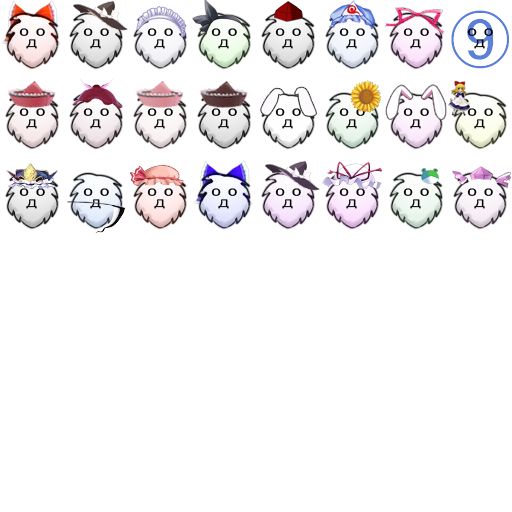
<style>
.page{position:relative;width:512px;height:512px;background:#ffffff}
.page>*{position:absolute;margin:0}
.t1{font:14px "MS-Gothic";color:#000000;scale:1.4 1}
.t2{font:9.8px "MS-Gothic";color:#000000;scale:1.43 1}
</style>
<div class="page">
<p class="t1" style="left:19px;top:28px;width:10px;height:8px">o</p>
<p class="t1" style="left:36px;top:28px;width:9px;height:8px">o</p>
<p class="t1" style="left:83px;top:28px;width:10px;height:8px">o</p>
<p class="t1" style="left:100px;top:28px;width:9px;height:8px">o</p>
<p class="t1" style="left:147px;top:28px;width:10px;height:8px">o</p>
<p class="t1" style="left:164px;top:28px;width:9px;height:8px">o</p>
<p class="t1" style="left:211px;top:28px;width:10px;height:8px">o</p>
<p class="t1" style="left:228px;top:28px;width:9px;height:8px">o</p>
<p class="t1" style="left:275px;top:28px;width:10px;height:8px">o</p>
<p class="t1" style="left:292px;top:28px;width:9px;height:8px">o</p>
<p class="t1" style="left:339px;top:28px;width:10px;height:8px">o</p>
<p class="t1" style="left:356px;top:28px;width:9px;height:8px">o</p>
<p class="t1" style="left:403px;top:28px;width:10px;height:8px">o</p>
<p class="t1" style="left:420px;top:28px;width:9px;height:8px">o</p>
<p class="t1" style="left:467px;top:28px;width:10px;height:8px">o</p>
<p class="t1" style="left:484px;top:28px;width:9px;height:8px">o</p>
<p class="t2" style="left:26px;top:39px;width:11px;height:10px">Д</p>
<p class="t2" style="left:90px;top:39px;width:11px;height:10px">Д</p>
<p class="t2" style="left:154px;top:39px;width:11px;height:10px">Д</p>
<p class="t2" style="left:218px;top:39px;width:11px;height:10px">Д</p>
<p class="t2" style="left:282px;top:39px;width:11px;height:10px">Д</p>
<p class="t2" style="left:346px;top:39px;width:11px;height:10px">Д</p>
<p class="t2" style="left:410px;top:39px;width:11px;height:10px">Д</p>
<p class="t2" style="left:474px;top:39px;width:11px;height:10px">Д</p>
<p class="t1" style="left:19px;top:108px;width:10px;height:8px">o</p>
<p class="t1" style="left:36px;top:108px;width:9px;height:8px">o</p>
<p class="t1" style="left:83px;top:108px;width:10px;height:8px">o</p>
<p class="t1" style="left:100px;top:108px;width:9px;height:8px">o</p>
<p class="t1" style="left:147px;top:108px;width:10px;height:8px">o</p>
<p class="t1" style="left:164px;top:108px;width:9px;height:8px">o</p>
<p class="t1" style="left:211px;top:108px;width:10px;height:8px">o</p>
<p class="t1" style="left:228px;top:108px;width:9px;height:8px">o</p>
<p class="t1" style="left:275px;top:108px;width:10px;height:8px">o</p>
<p class="t1" style="left:292px;top:108px;width:9px;height:8px">o</p>
<p class="t1" style="left:339px;top:108px;width:10px;height:8px">o</p>
<p class="t1" style="left:356px;top:108px;width:9px;height:8px">o</p>
<p class="t1" style="left:403px;top:108px;width:10px;height:8px">o</p>
<p class="t1" style="left:420px;top:108px;width:9px;height:8px">o</p>
<p class="t1" style="left:467px;top:108px;width:10px;height:8px">o</p>
<p class="t1" style="left:484px;top:108px;width:9px;height:8px">o</p>
<p class="t2" style="left:26px;top:119px;width:11px;height:10px">Д</p>
<p class="t2" style="left:90px;top:119px;width:11px;height:10px">Д</p>
<p class="t2" style="left:154px;top:119px;width:11px;height:10px">Д</p>
<p class="t2" style="left:218px;top:119px;width:11px;height:10px">Д</p>
<p class="t2" style="left:282px;top:119px;width:11px;height:10px">Д</p>
<p class="t2" style="left:346px;top:119px;width:11px;height:10px">Д</p>
<p class="t2" style="left:410px;top:119px;width:11px;height:10px">Д</p>
<p class="t2" style="left:474px;top:119px;width:11px;height:10px">Д</p>
<p class="t1" style="left:19px;top:188px;width:10px;height:8px">o</p>
<p class="t1" style="left:36px;top:188px;width:9px;height:8px">o</p>
<p class="t1" style="left:83px;top:188px;width:10px;height:8px">o</p>
<p class="t1" style="left:100px;top:188px;width:9px;height:8px">o</p>
<p class="t1" style="left:147px;top:188px;width:10px;height:8px">o</p>
<p class="t1" style="left:164px;top:188px;width:9px;height:8px">o</p>
<p class="t1" style="left:211px;top:188px;width:10px;height:8px">o</p>
<p class="t1" style="left:228px;top:188px;width:9px;height:8px">o</p>
<p class="t1" style="left:275px;top:188px;width:10px;height:8px">o</p>
<p class="t1" style="left:292px;top:188px;width:9px;height:8px">o</p>
<p class="t1" style="left:339px;top:188px;width:10px;height:8px">o</p>
<p class="t1" style="left:356px;top:188px;width:9px;height:8px">o</p>
<p class="t1" style="left:403px;top:188px;width:10px;height:8px">o</p>
<p class="t1" style="left:420px;top:188px;width:9px;height:8px">o</p>
<p class="t1" style="left:467px;top:188px;width:10px;height:8px">o</p>
<p class="t1" style="left:484px;top:188px;width:9px;height:8px">o</p>
<p class="t2" style="left:26px;top:199px;width:11px;height:10px">Д</p>
<p class="t2" style="left:90px;top:199px;width:11px;height:10px">Д</p>
<p class="t2" style="left:154px;top:199px;width:11px;height:10px">Д</p>
<p class="t2" style="left:218px;top:199px;width:11px;height:10px">Д</p>
<p class="t2" style="left:282px;top:199px;width:11px;height:10px">Д</p>
<p class="t2" style="left:346px;top:199px;width:11px;height:10px">Д</p>
<p class="t2" style="left:410px;top:199px;width:11px;height:10px">Д</p>
<p class="t2" style="left:474px;top:199px;width:11px;height:10px">Д</p>
</div>
